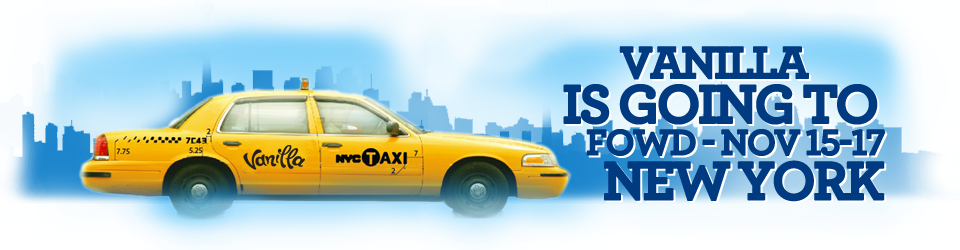
<style>
.page{position:relative;width:960px;height:250px}
.page>*{position:absolute;margin:0}
.t1{font:47.5px "Archer-Bold";letter-spacing:-0.075em;color:#003b82;text-transform:uppercase;font-weight:bold}
.t2{font:57px "Archer-Bold";letter-spacing:-0.075em;color:#003b82;text-transform:uppercase;font-weight:bold}
.t3{font:38px "Archer-Bold";letter-spacing:-0.075em;color:#003b82;text-transform:uppercase;font-weight:bold}
</style>
<div class="page">
<p class="t1" style="left:619px;top:46px;width:190px;height:34px">Vanilla</p>
<p class="t1" style="left:621px;top:48px;width:190px;height:34px">Vanilla</p>
<p class="t2" style="left:563px;top:84px;width:315px;height:41px">is Going to</p>
<p class="t2" style="left:565px;top:86px;width:315px;height:41px">is Going to</p>
<p class="t3" style="left:586px;top:129px;width:300px;height:27px">FOWD - NOv 15-17</p>
<p class="t3" style="left:588px;top:131px;width:300px;height:27px">FOWD - NOv 15-17</p>
<p class="t2" style="left:604px;top:160px;width:281px;height:42px">NEW York</p>
<p class="t2" style="left:606px;top:162px;width:281px;height:42px">NEW York</p>
</div>
